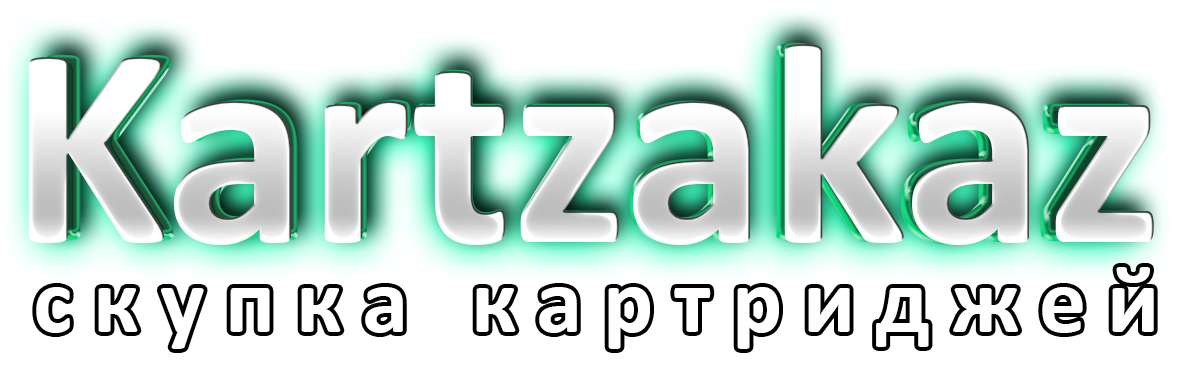
<style>
.page{position:relative;width:1179px;height:381px;background:#ffffff}
.page>*{position:absolute;margin:0}
.t1{font:289.1px "Calibri-Bold";letter-spacing:-0.025em;font-weight:bold}
</style>
<div class="page">
<p class="t1" style="left:28px;top:44px;width:1126px;height:201px">Kartzakaz</p>
</div>
